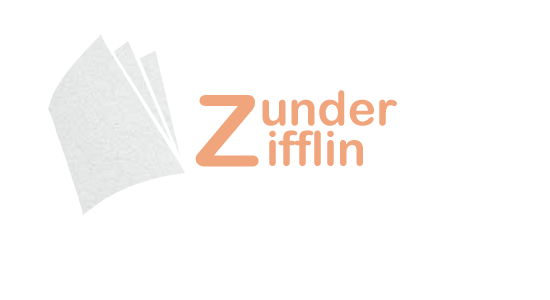
<style>
.page{position:relative;width:550px;height:300px;background:#ffffff}
.page>*{position:absolute;margin:0}
.t1{font:100px "ArialRoundedMTBold";color:#f1a57c}
.t2{font:48px "ArialRoundedMTBold";color:#f1a57c}
</style>
<div class="page">
<p class="t1" style="left:195px;top:95px;width:64px;height:72px">Z</p>
<p class="t2" style="left:262px;top:90px;width:135px;height:36px">under</p>
<p class="t2" style="left:269px;top:130px;width:94px;height:36px">ifflin</p>
</div>
